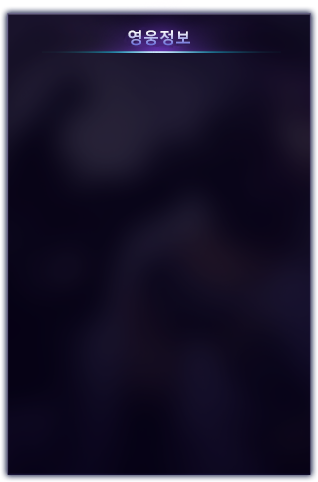
<style>
.page{position:relative;width:318px;height:482px}
.page>*{position:absolute;margin:0}
.t1{font:16px "MalgunGothicBold"}
</style>
<div class="page">
<p class="t1" style="left:128px;top:30px;width:62px;height:16px">영웅정보</p>
</div>
